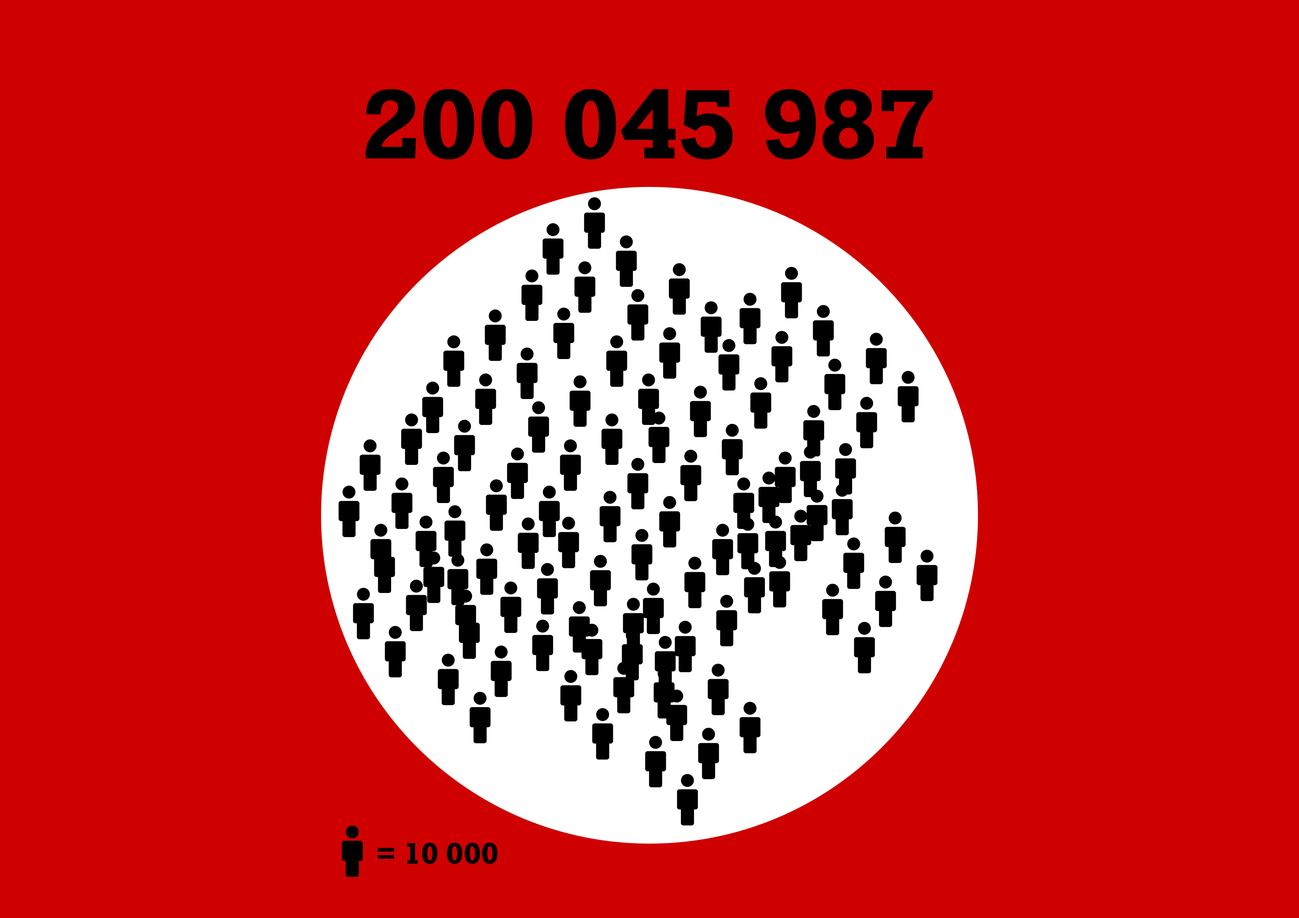
<style>
.page{position:relative;width:1299px;height:918px;background:#cf0000}
.page>*{position:absolute;margin:0}
.t1{font:92.6px "Rockwell-Bold";color:#000000}
.t2{font:27.8px "Rockwell-Bold";color:#000000}
</style>
<div class="page">
<p class="t1" style="left:365px;top:89px;width:568px;height:71px">200 045 987</p>
<p class="t2" style="left:377px;top:843px;width:121px;height:21px">= 10 000</p>
</div>
